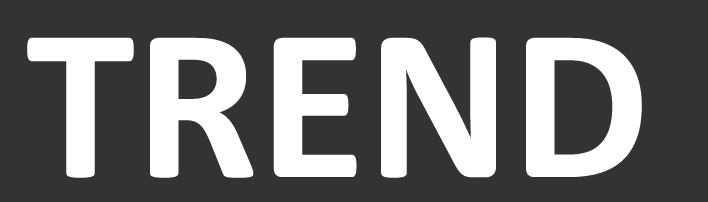
<style>
.page{position:relative;width:708px;height:202px;background:#333333}
.page>*{position:absolute;margin:0}
.t1{font:220px "Calibri-Bold";color:#ffffff}
</style>
<div class="page">
<p class="t1" style="left:27px;top:37px;width:615px;height:141px">TREND</p>
</div>
